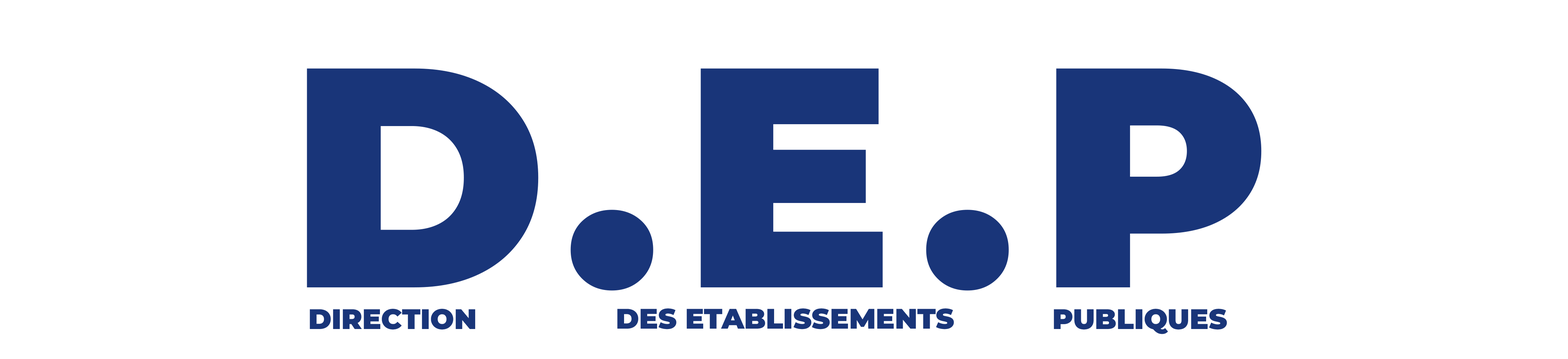
<style>
.page{position:relative;width:1568px;height:359px;background:#ffffff}
.page>*{position:absolute;margin:0}
.t1{font:312.5px "MontserratRoman-Black";letter-spacing:0.075em;color:#193579;text-transform:uppercase}
.t2{font:28.1px "MontserratRoman-Black";color:#193579;text-transform:uppercase}
</style>
<div class="page">
<p class="t1" style="left:307px;top:68px;width:955px;height:223px">D.E.P</p>
<p class="t2" style="left:310px;top:309px;width:166px;height:21px">Direction</p>
<p class="t2" style="left:617px;top:308px;width:337px;height:21px">des Etablissements</p>
<p class="t2" style="left:1054px;top:309px;width:173px;height:25px">Publiques</p>
</div>
